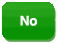
<style>
.page{position:relative;width:58px;height:44px;background:#099304}
.page>*{position:absolute;margin:0}
.t1{font:13.3px "Helvetica-Bold";letter-spacing:-0.005em;color:#ffffff}
</style>
<div class="page">
<p class="t1" style="left:20px;top:15px;width:17px;height:11px">No</p>
</div>
